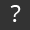
<style>
.page{position:relative;width:30px;height:30px;background:#333333}
.page>*{position:absolute;margin:0}
.t1{font:24px "OpenSans";color:#ffffff}
</style>
<div class="page">
<p class="t1" style="left:10px;top:5px;width:11px;height:17px">?</p>
</div>
